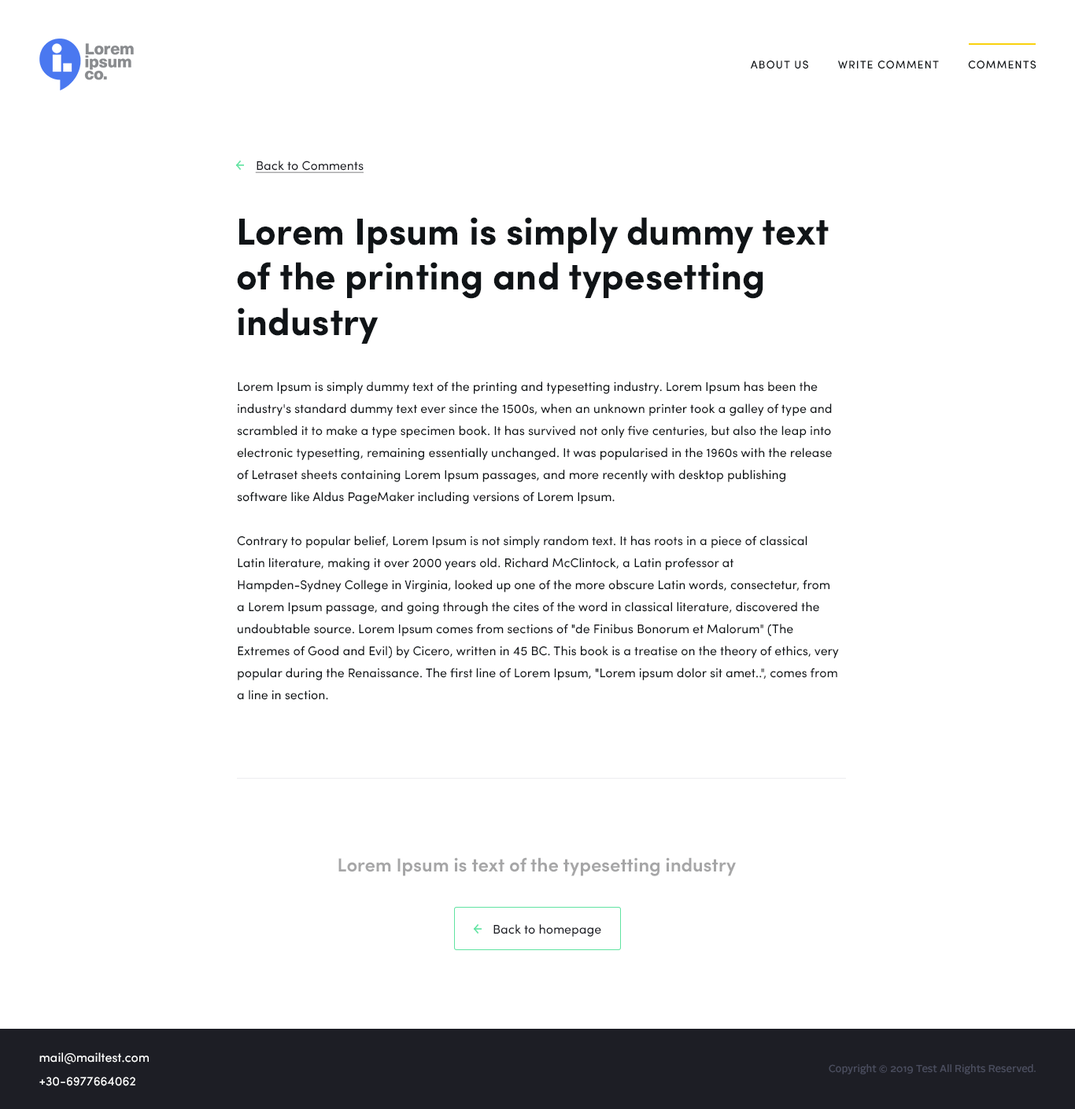
<style>
.page{position:relative;width:1075px;height:1109px;background:#ffffff}
.page>*{position:absolute;margin:0}
.t1{font:11px "SofiaPro-Medium";letter-spacing:0.07em;color:#111518;text-transform:uppercase}
.t2{font:12.6px "SofiaProRegular";color:#1d1e25;text-decoration:underline}
.t3{font:37.8px "SofiaPro-Bold";color:#101417}
.t4{font:12.6px/22px "SofiaProRegular";color:#101417}
.t5{font:18.9px "SofiaPro-SemiBold";color:#a6a6a7}
.t6{font:12.6px "SofiaProRegular";color:#1d1e25}
.t7{font:12.6px/23.6px "SofiaProRegular";color:#ffffff}
.t8{font:10.2px "AlrightSans-Medium";color:#4a4d5e}
</style>
<div class="page">
<p class="t1" style="left:750px;top:61px;width:286px;height:8px">about us        Write comment        Comments</p>
<p class="t2" style="left:255px;top:161px;width:109px;height:12px">Back to Comments</p>
<p class="t3" style="left:237px;top:217px;width:592px;height:127px">Lorem Ipsum is simply dummy text of the printing and typesetting industry</p>
<p class="t4" style="left:237px;top:382px;width:602px;height:318px">Lorem Ipsum is simply dummy text of the printing and typesetting industry. Lorem Ipsum has been the industry's standard dummy text ever since the 1500s, when an unknown printer took a galley of type and scrambled it to make a type specimen book. It has survived not only five centuries, but also the leap into electronic typesetting, remaining essentially unchanged. It was popularised in the 1960s with the release of Letraset sheets containing Lorem Ipsum passages, and more recently with desktop publishing software like Aldus PageMaker including versions of Lorem Ipsum.<br><br>Contrary to popular belief, Lorem Ipsum is not simply random text. It has roots in a piece of classical Latin literature, making it over 2000 years old. Richard McClintock, a Latin professor at Hampden-Sydney College in Virginia, looked up one of the more obscure Latin words, consectetur, from a Lorem Ipsum passage, and going through the cites of the word in classical literature, discovered the undoubtable source. Lorem Ipsum comes from sections of "de Finibus Bonorum et Malorum" (The Extremes of Good and Evil) by Cicero, written in 45 BC. This book is a treatise on the theory of ethics, very popular during the Renaissance. The first line of Lorem Ipsum, "Lorem ipsum dolor sit amet..", comes from a line in section.</p>
<p class="t5" style="left:338px;top:858px;width:398px;height:19px">Lorem Ipsum is text of the typesetting industry</p>
<p class="t6" style="left:493px;top:925px;width:108px;height:12px">Back to homepage</p>
<p class="t7" style="left:39px;top:1053px;width:110px;height:34px">mail@mailtest.com<br>+30-6977664062</p>
<p class="t8" style="left:829px;top:1065px;width:206px;height:10px">Copyright © 2019 Test All Rights Reserved.</p>
</div>
